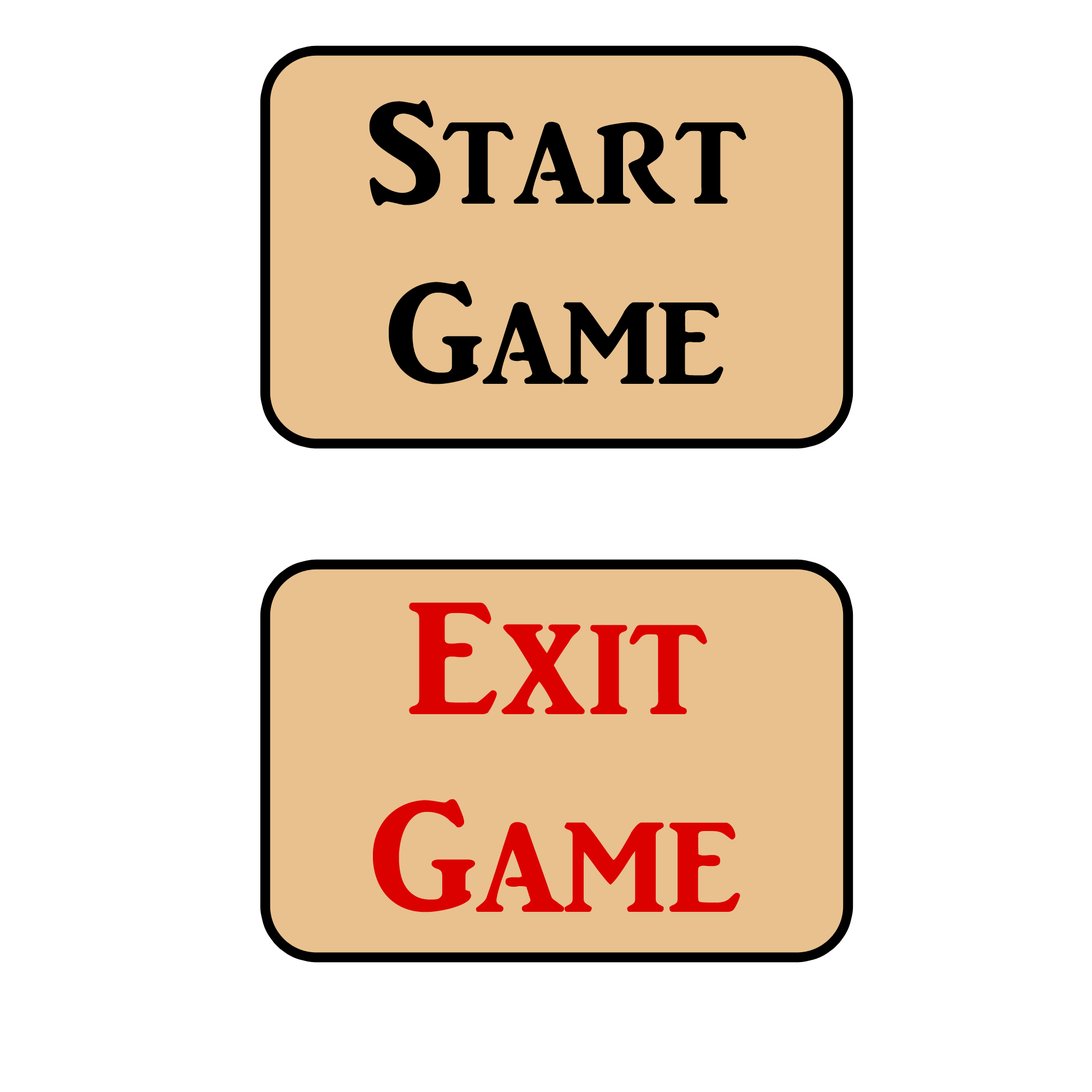
<style>
.page{position:relative;width:1092px;height:1092px;background:#ffffff}
.page>*{position:absolute;margin:0}
.t1{font:150.2px "ARJULIAN";color:#000000}
.t2{font:164.8px "ARJULIAN";color:#dc0101}
</style>
<div class="page">
<p class="t1" style="left:369px;top:100px;width:377px;height:284px;text-align:center">Start<br>Game</p>
<p class="t2" style="left:373px;top:602px;width:367px;height:310px;text-align:center">Exit<br>  Game</p>
</div>
